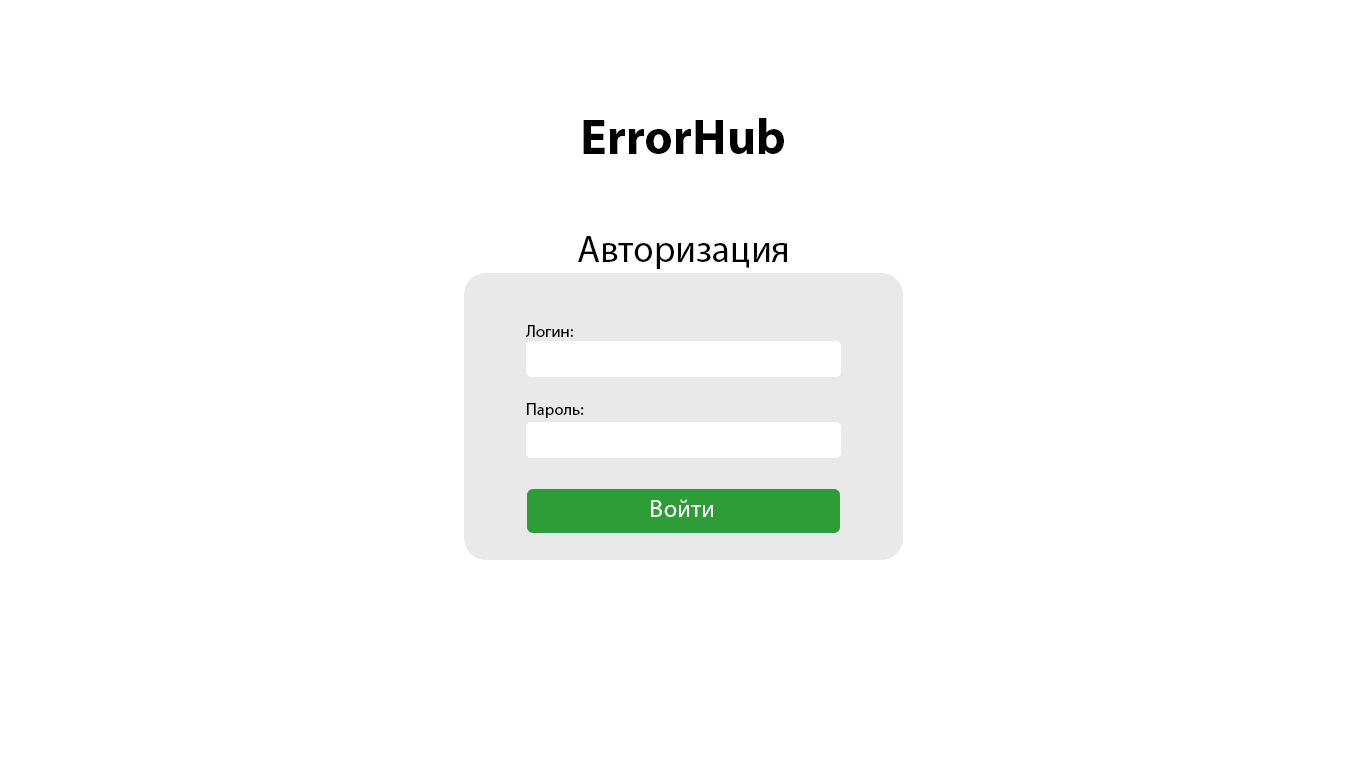
<style>
.page{position:relative;width:1366px;height:768px;background:#ffffff}
.page>*{position:absolute;margin:0}
.t1{font:50px "MyriadPro-Bold";color:#000000}
.t2{font:37.5px "MyriadPro-Regular";color:#000000}
.t3{font:16.7px "MyriadPro-Regular";color:#000000}
.t4{font:25px "MyriadPro-Regular";color:#ffffff}
</style>
<div class="page">
<p class="t1" style="left:583px;top:118px;width:201px;height:36px">ErrorHub</p>
<p class="t2" style="left:578px;top:236px;width:209px;height:33px">Авторизация</p>
<p class="t3" style="left:525px;top:325px;width:48px;height:12px">Логин:</p>
<p class="t3" style="left:527px;top:403px;width:57px;height:15px">Пароль:</p>
<p class="t4" style="left:651px;top:499px;width:62px;height:18px">Войти</p>
</div>
